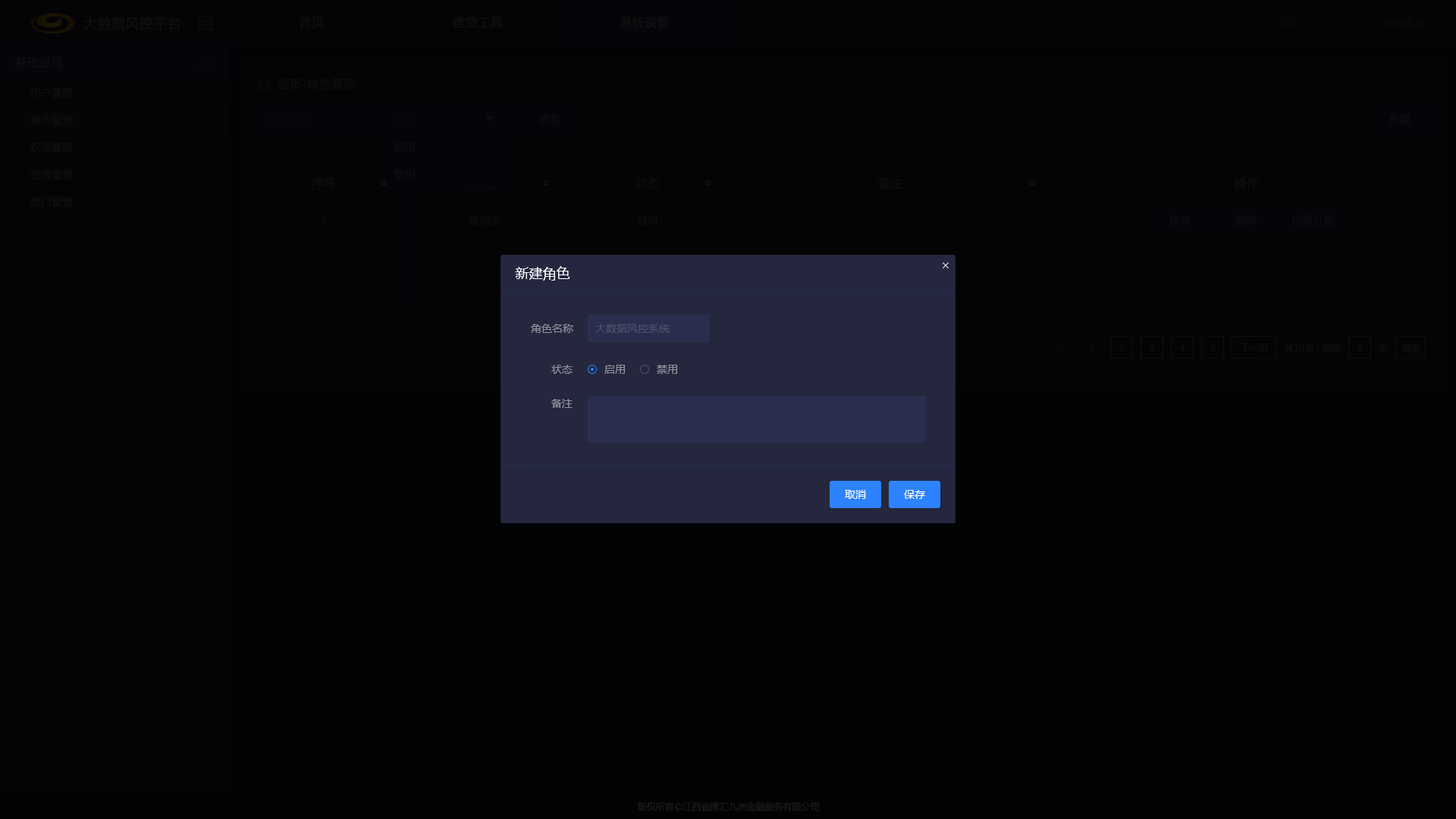
<style>
.page{position:relative;width:1456px;height:819px;background:#040406}
.page>*{position:absolute;margin:0}
.t1{font:13.6px "MicrosoftYaHei";color:#0e0e10;font-weight:bold}
.t2{font:12.1px "MicrosoftYaHei";color:#0e0e10;font-weight:bold}
.t3{font:10.6px "MicrosoftYaHei";color:#09090c}
.t4{font:12.1px "MicrosoftYaHei";color:#0e0e10}
.t5{font:10.6px "MicrosoftYaHei";color:#0e0e10}
.t6{font:10.6px "ArialMT"}
.t7{font:13.6px "MicrosoftYaHei";color:#ffffff}
.t8{font:10.6px "MicrosoftYaHei";color:#92939f}
.t9{font:10.6px "MicrosoftYaHei";color:#4d5068}
.t10{font:10.6px "ArialMT";color:#0e0e10}
.t11{font:9.1px "ArialMT";color:#0e0e10}
.t12{font:9.1px "MicrosoftYaHei";color:#0e0e10}
.t13{font:10.6px "MicrosoftYaHei";color:#ffffff}
.t14{font:9.1px "MicrosoftYaHei";color:#191919}
</style>
<div class="page">
<p class="t1" style="left:83px;top:16px;width:98px;height:15px">大数据风控平台</p>
<p class="t2" style="left:299px;top:16px;width:25px;height:13px">首页</p>
<p class="t2" style="left:453px;top:17px;width:50px;height:12px">信贷工具</p>
<p class="t2" style="left:620px;top:16px;width:50px;height:13px">系统设置</p>
<p class="t3" style="left:1383px;top:17px;width:43px;height:11px">注销系统</p>
<p class="t3" style="left:1276px;top:19px;width:40px;height:8px">ABC123</p>
<p class="t4" style="left:14px;top:56px;width:49px;height:12px">基础设置</p>
<p class="t5" style="left:30px;top:87px;width:44px;height:12px">用户管理</p>
<p class="t4" style="left:278px;top:78px;width:78px;height:12px">首页-角色管理</p>
<p class="t5" style="left:30px;top:115px;width:44px;height:11px">角色管理</p>
<p class="t5" style="left:538px;top:115px;width:22px;height:9px">搜索</p>
<p class="t5" style="left:1389px;top:115px;width:21px;height:9px">新建</p>
<p class="t5" style="left:30px;top:142px;width:44px;height:11px">权限管理</p>
<p class="t5" style="left:394px;top:143px;width:21px;height:9px">启用</p>
<p class="t5" style="left:30px;top:169px;width:44px;height:11px">资源管理</p>
<p class="t5" style="left:394px;top:170px;width:21px;height:9px">禁用</p>
<p class="t4" style="left:311px;top:177px;width:25px;height:13px">序号</p>
<p class="t4" style="left:635px;top:177px;width:25px;height:13px">状态</p>
<p class="t4" style="left:877px;top:177px;width:25px;height:13px">备注</p>
<p class="t4" style="left:1235px;top:177px;width:24px;height:13px">操作</p>
<p class="t5" style="left:30px;top:196px;width:44px;height:12px">部门管理</p>
<p class="t6" style="left:322px;top:216px;width:3px;height:8px">1</p>
<p class="t5" style="left:469px;top:215px;width:31px;height:11px">管理员</p>
<p class="t5" style="left:636px;top:215px;width:21px;height:11px">启用</p>
<p class="t5" style="left:1169px;top:215px;width:22px;height:11px">修改</p>
<p class="t5" style="left:1235px;top:215px;width:22px;height:11px">删除</p>
<p class="t5" style="left:1291px;top:215px;width:44px;height:11px">权限分配</p>
<p class="t7" style="left:515px;top:266px;width:55px;height:15px">新建角色</p>
<p class="t8" style="left:531px;top:324px;width:42px;height:9px">角色名称</p>
<p class="t9" style="left:595px;top:324px;width:75px;height:9px">大数据风控系统</p>
<p class="t10" style="left:1090px;top:344px;width:4px;height:7px">1</p>
<p class="t11" style="left:1119px;top:344px;width:6px;height:7px">2</p>
<p class="t11" style="left:1150px;top:344px;width:5px;height:7px">3</p>
<p class="t11" style="left:1180px;top:344px;width:5px;height:7px">4</p>
<p class="t11" style="left:1210px;top:344px;width:6px;height:7px">5</p>
<p class="t12" style="left:1241px;top:344px;width:27px;height:9px">下一页</p>
<p class="t12" style="left:1285px;top:343px;width:56px;height:10px">共10页，到第</p>
<p class="t11" style="left:1357px;top:344px;width:6px;height:7px">6</p>
<p class="t12" style="left:1379px;top:344px;width:9px;height:9px">页</p>
<p class="t12" style="left:1401px;top:343px;width:19px;height:10px">确定</p>
<p class="t8" style="left:551px;top:365px;width:22px;height:9px">状态</p>
<p class="t8" style="left:604px;top:365px;width:21px;height:9px">启用</p>
<p class="t8" style="left:657px;top:365px;width:20px;height:9px">禁用</p>
<p class="t8" style="left:551px;top:399px;width:22px;height:9px">备注</p>
<p class="t13" style="left:845px;top:490px;width:21px;height:9px">取消</p>
<p class="t13" style="left:904px;top:490px;width:21px;height:9px">保存</p>
<p class="t14" style="left:637px;top:802px;width:182px;height:9px">版权所有©江西省博汇九洲金融服务有限公司</p>
</div>
